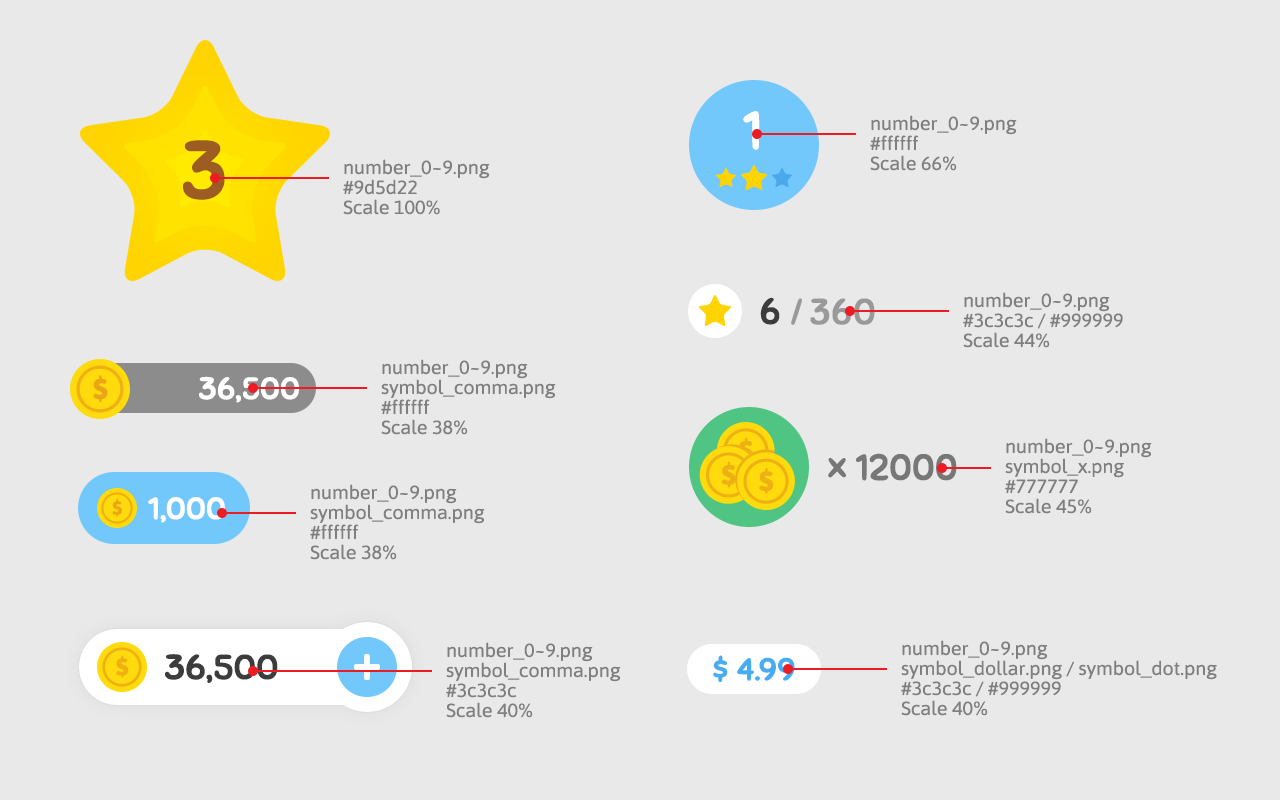
<style>
.page{position:relative;width:1280px;height:800px;background:#e9e9e9}
.page>*{position:absolute;margin:0}
.t1{font:53.1px "Sniglet-Regular";letter-spacing:0.02em;color:#ffffff;font-weight:bold}
.t2{font:19px/20px "Asap-Regular";letter-spacing:-0.01em;color:#7f7f7f;scale:1.05 1}
.t3{font:80px "Sniglet-Regular";letter-spacing:0.02em;color:#9d5d22;font-weight:bold}
.t4{font:36px "Sniglet-Regular";letter-spacing:0.02em;color:#3c3c3c;font-weight:bold}
.t5{font:36px "Sniglet-Regular";letter-spacing:0.02em;color:#999999;font-weight:bold}
.t6{font:30.4px "Sniglet-Regular";letter-spacing:-0.01em;color:#ffffff;font-weight:bold;scale:1.05 1}
.t7{font:26.6px "Asap-Bold";letter-spacing:-0.01em;color:#eeb113;font-weight:bold;scale:1.06 1}
.t8{font:36px "Sniglet-Regular";color:#777777;font-weight:bold}
.t9{font:34.2px "Sniglet-Regular";letter-spacing:-0.01em;color:#3c3c3c;font-weight:bold;scale:1.05 1}
.t10{font:23.1px "Asap-Bold";letter-spacing:-0.01em;color:#eeb113;font-weight:bold;scale:1.05 1}
.t11{font:30.4px "Sniglet-Regular";color:#46adf2;font-weight:bold;scale:1.05 1}
</style>
<div class="page">
<p class="t1" style="left:743px;top:111px;width:17px;height:39px">1</p>
<p class="t2" style="left:870px;top:115px;width:147px;height:56px">number_0~9.png<br>#ffffff<br>Scale 66%</p>
<p class="t3" style="left:183px;top:140px;width:42px;height:60px">3</p>
<p class="t2" style="left:343px;top:159px;width:147px;height:56px">number_0~9.png<br>#9d5d22<br>Scale 100%</p>
<p class="t2" style="left:963px;top:292px;width:160px;height:56px">number_0~9.png<br>#3c3c3c / #999999 <br>Scale 44%</p>
<p class="t4" style="left:760px;top:297px;width:20px;height:28px">6</p>
<p class="t5" style="left:810px;top:298px;width:65px;height:27px">360</p>
<p class="t2" style="left:381px;top:359px;width:175px;height:76px">number_0~9.png<br>symbol_comma.png<br>#ffffff<br>Scale 38%</p>
<p class="t6" style="left:199px;top:376px;width:100px;height:27px">36,500</p>
<p class="t2" style="left:1005px;top:438px;width:147px;height:76px">number_0~9.png<br>symbol_x.png<br>#777777<br>Scale 45%</p>
<p class="t7" style="left:739px;top:440px;width:14px;height:21px">S</p>
<p class="t8" style="left:828px;top:453px;width:129px;height:28px">x 12000</p>
<p class="t7" style="left:721px;top:465px;width:15px;height:20px">S</p>
<p class="t7" style="left:759px;top:471px;width:15px;height:21px">S</p>
<p class="t2" style="left:310px;top:484px;width:175px;height:76px">number_0~9.png<br>symbol_comma.png<br>#ffffff<br>Scale 38%</p>
<p class="t6" style="left:148px;top:497px;width:77px;height:26px">1,000</p>
<p class="t2" style="left:901px;top:640px;width:316px;height:76px">number_0~9.png <br>symbol_dollar.png / symbol_dot.png<br>#3c3c3c / #999999 <br>Scale 40%</p>
<p class="t9" style="left:165px;top:654px;width:113px;height:29px">36,500</p>
<p class="t2" style="left:446px;top:642px;width:175px;height:76px">number_0~9.png<br>symbol_comma.png<br>#3c3c3c<br>Scale 40%</p>
<p class="t10" style="left:116px;top:658px;width:13px;height:18px">S</p>
<p class="t11" style="left:713px;top:655px;width:82px;height:27px">$ 4.99</p>
</div>
